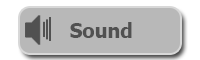
<style>
.page{position:relative;width:200px;height:60px;background:#b8b8b8}
.page>*{position:absolute;margin:0}
.t1{font:20px "Tahoma-Bold";color:#515151}
</style>
<div class="page">
<p class="t1" style="left:70px;top:22px;width:62px;height:16px">Sound</p>
</div>
